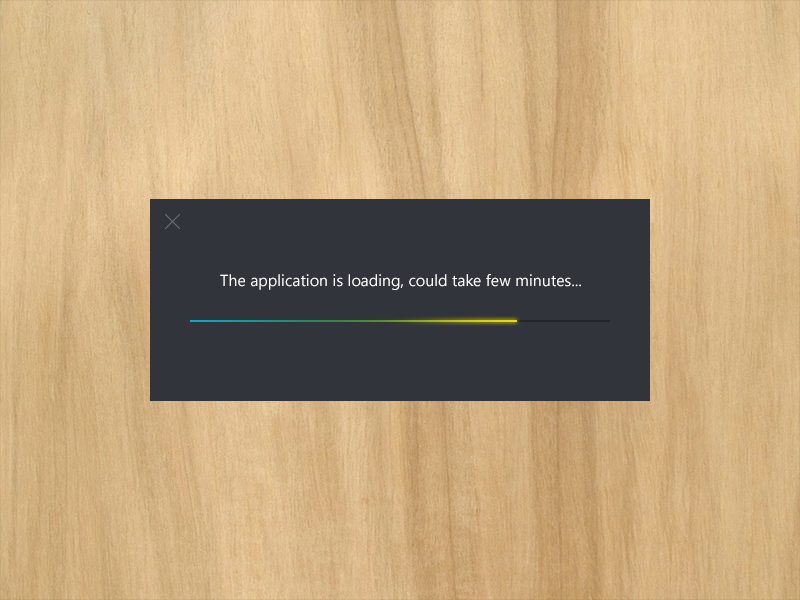
<style>
.page{position:relative;width:800px;height:600px;background:#31343b}
.page>*{position:absolute;margin:0}
.t1{font:16px "SegoeUI";color:#ffffff}
</style>
<div class="page">
<p class="t1" style="left:220px;top:274px;width:361px;height:16px">The application is loading, could take few minutes...</p>
</div>
